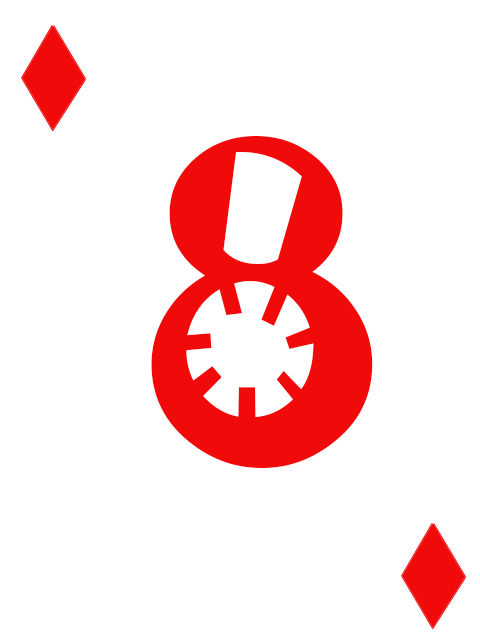
<style>
.page{position:relative;width:480px;height:640px;background:#ffffff}
.page>*{position:absolute;margin:0}
.t1{font:386.3px "Jokerman-Regular";color:#f10a0a}
</style>
<div class="page">
<p class="t1" style="left:151px;top:136px;width:222px;height:332px">8</p>
</div>
